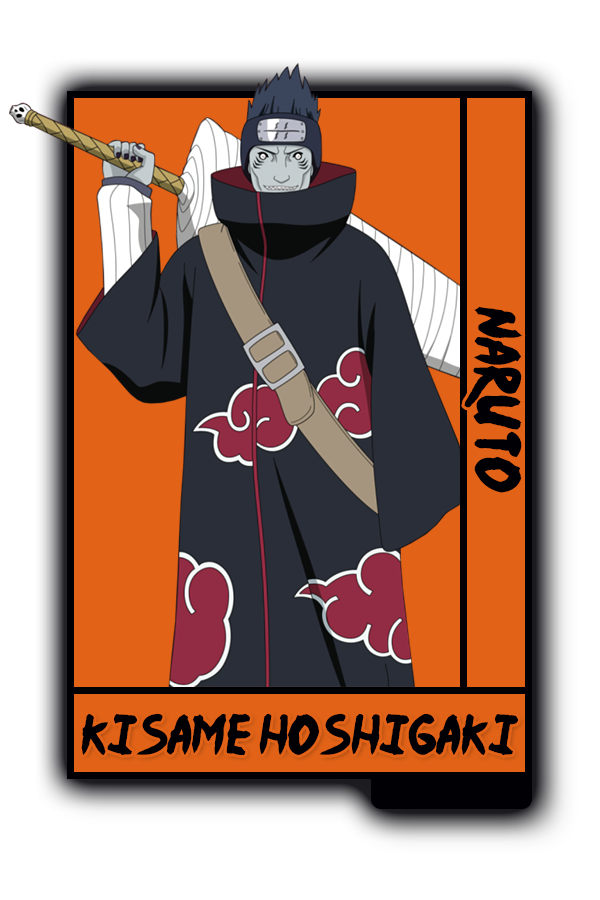
<style>
.page{position:relative;width:600px;height:900px;background:#ffffff}
.page>*{position:absolute;margin:0}
.t1{font:52px "Ninja-Naruto";color:#010005}
.t2{font:45.6px "Ninja-Naruto";color:#010005}
</style>
<div class="page">
<p class="t1" style="left:464px;top:307px;width:59px;height:186px;rotate:90deg">Naruto</p>
<p class="t2" style="left:81px;top:713px;width:437px;height:42px">Kisame Hoshigaki</p>
</div>
